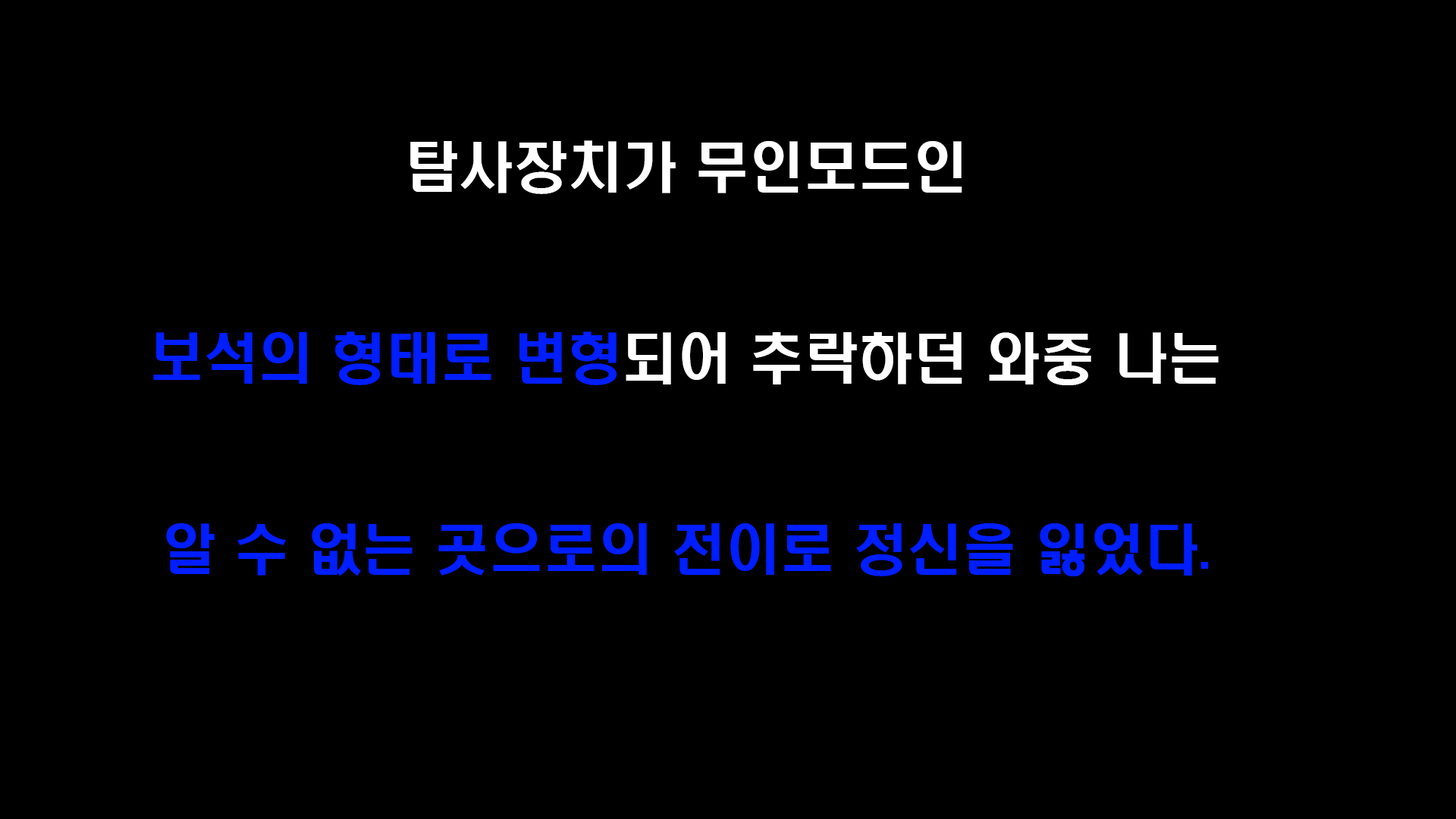
<style>
.page{position:relative;width:1456px;height:819px;background:#000000}
.page>*{position:absolute;margin:0}
.t1{font:54.6px "H2hdrM";color:#001eff}
.t2{font:54.6px "H2hdrM";color:#ffffff}
</style>
<div class="page">
<p class="t1" style="left:153px;top:140px;width:1066px;height:436px;text-align:center"><span class="t2">탐사장치가 무인모드인<br></span><br>보석의 형태로 변형<span class="t2">되어 추락하던 와중 나는 <br><br></span>알 수 없는 곳으로의 전이로 정신을 잃었다.</p>
</div>
